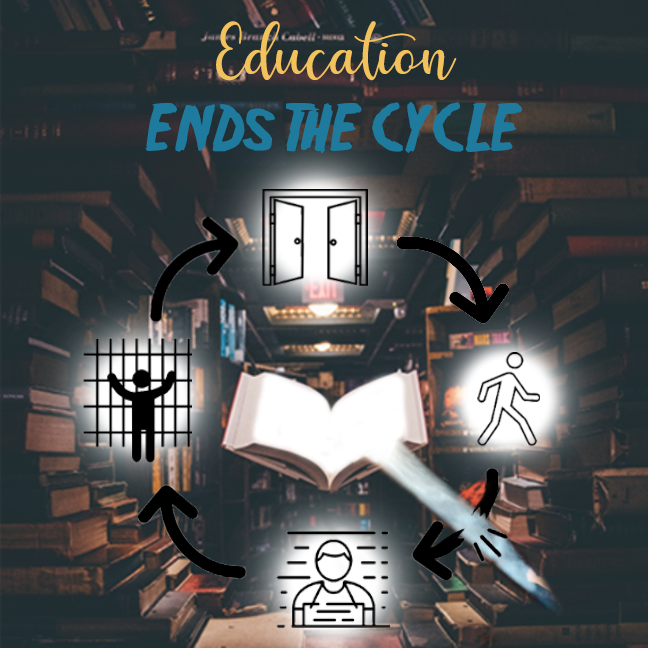
<style>
.page{position:relative;width:648px;height:648px}
.page>*{position:absolute;margin:0}
.t1{font:60px/36px "Friday13";color:#1e7b9d}
.t2{font:72px/36px "HelloRegular";color:#f2c25c}
</style>
<div class="page">
<p class="t1" style="left:145px;top:21px;width:377px;height:133px;text-align:center"><span class="t2">Education <br><br></span>ENDs THE CYCLE</p>
</div>
